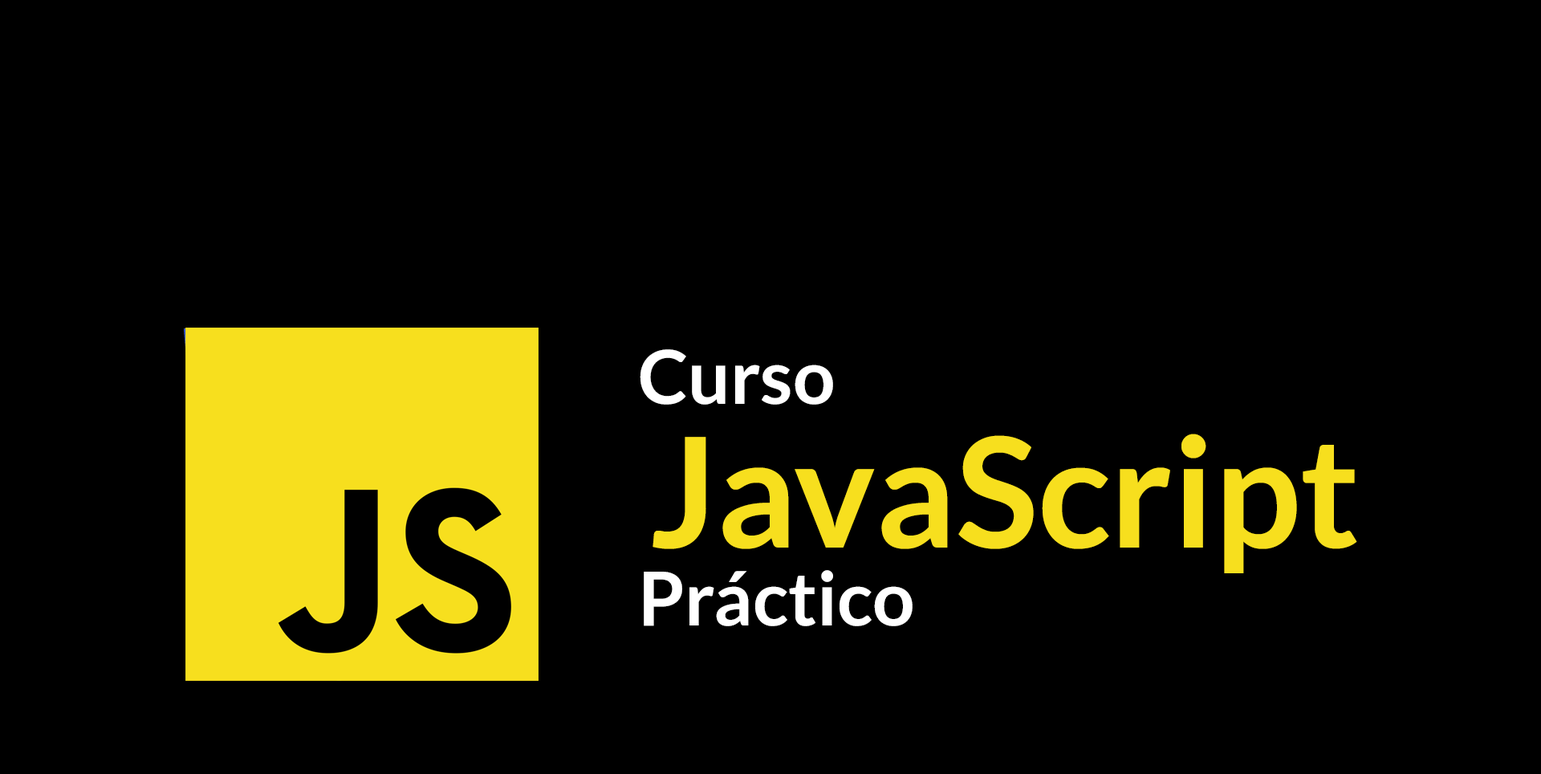
<style>
.page{position:relative;width:1541px;height:774px;background:#000000}
.page>*{position:absolute;margin:0}
.t1{font:74.3px "Lato-Bold";color:#ffffff}
.t2{font:152.8px "Lato-Bold";color:#f7df1e}
</style>
<div class="page">
<p class="t1" style="left:640px;top:349px;width:193px;height:56px">Curso</p>
<p class="t2" style="left:653px;top:433px;width:704px;height:140px">JavaScript</p>
<p class="t1" style="left:644px;top:570px;width:269px;height:56px">Práctico</p>
</div>
